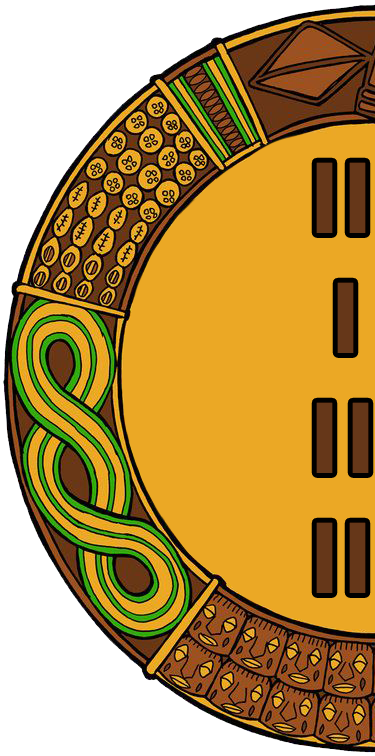
<style>
.page{position:relative;width:375px;height:756px;background:#eba825}
.page>*{position:absolute;margin:0}
.t1{font:100px "TTNorms-Bold";color:#663719}
</style>
<div class="page">
<p class="t1" style="left:316px;top:162px;width:53px;height:431px">II<br> I <br>I I<br>II</p>
</div>
